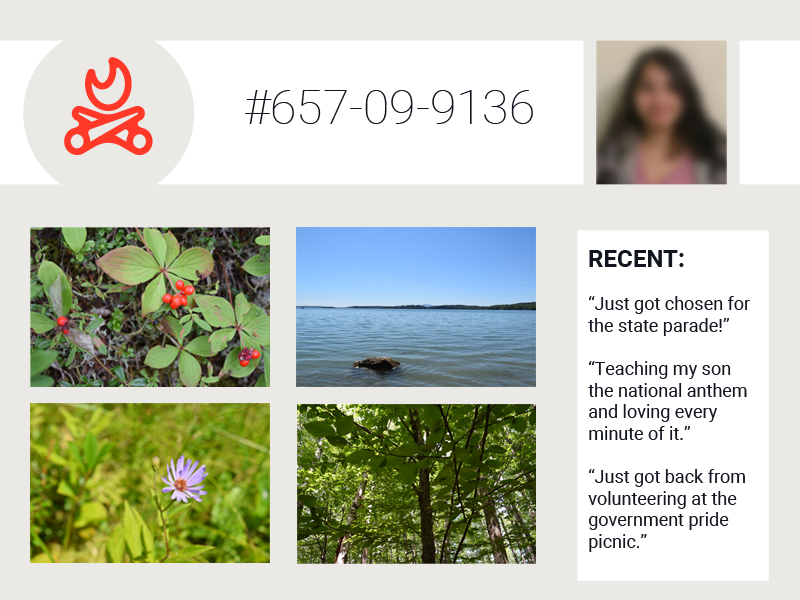
<style>
.page{position:relative;width:800px;height:600px;background:#eae9e5}
.page>*{position:absolute;margin:0}
.t1{font:48px "Roboto-Thin";color:#11151e}
.t2{font:18px "Roboto-Regular";color:#11151e}
.t3{font:24px "Roboto-Bold";color:#11151e}
</style>
<div class="page">
<p class="t1" style="left:245px;top:90px;width:288px;height:34px">#657-09-9136</p>
<p class="t2" style="left:588px;top:250px;width:162px;height:302px"><span class="t3">RECENT: <br></span><br>“Just got chosen for the state parade!”<br><br>“Teaching my son the national anthem and loving every minute of it.”<br><br>“Just got back from volunteering at the government pride picnic.”</p>
</div>
